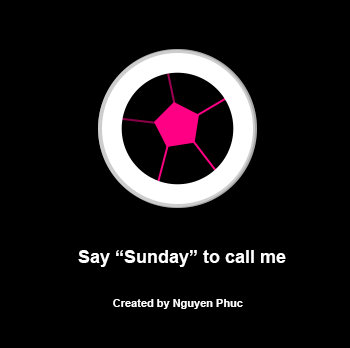
<style>
.page{position:relative;width:350px;height:348px;background:#000000}
.page>*{position:absolute;margin:0}
.t1{font:18px "Arial-BoldMT";color:#ffffff}
.t2{font:11px "Arial-BoldMT";color:#ffffff}
</style>
<div class="page">
<p class="t1" style="left:78px;top:250px;width:208px;height:17px">Say “Sunday” to call me</p>
<p class="t2" style="left:113px;top:299px;width:130px;height:10px">Created by Nguyen Phuc</p>
</div>
